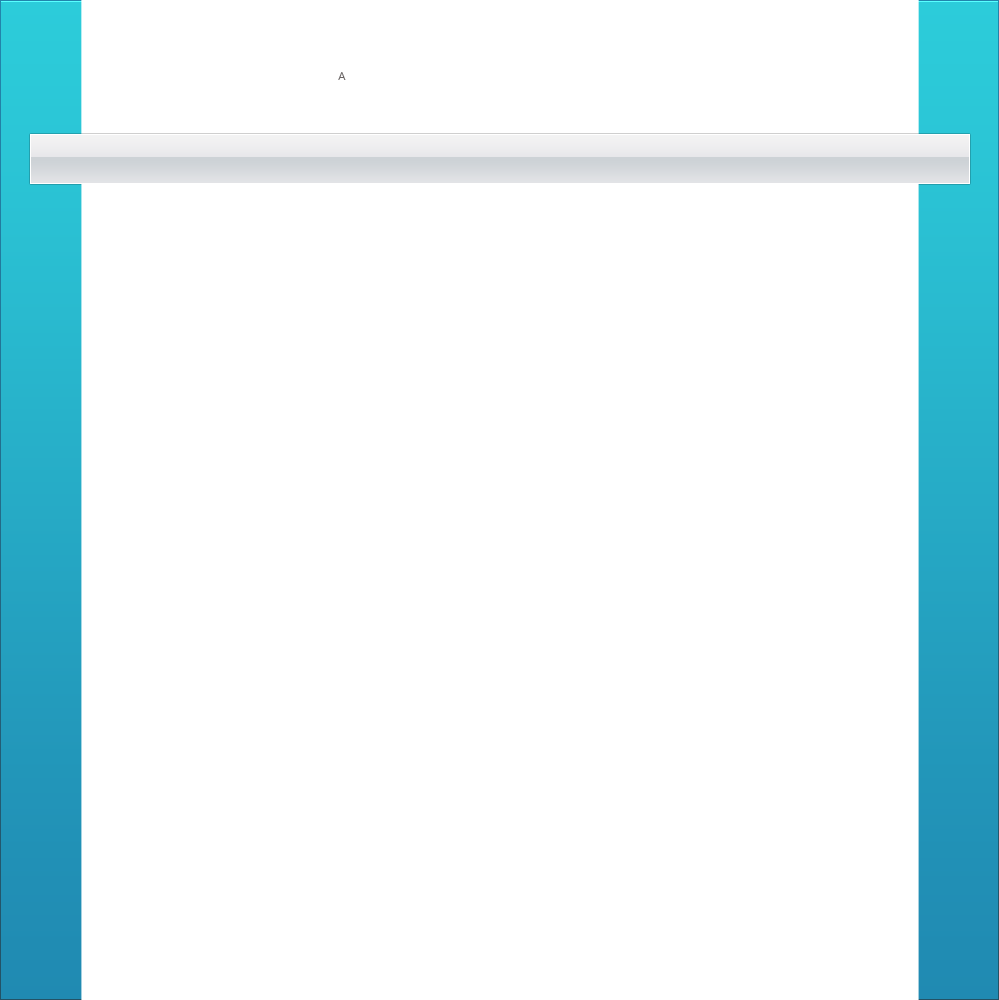
<style>
.page{position:relative;width:999px;height:1000px;background:#ffffff}
.page>*{position:absolute;margin:0}
.t1{font:11px "ArialMT";color:#696464}
</style>
<div class="page">
<p class="t1" style="left:338px;top:72px;width:8px;height:8px">A</p>
</div>
